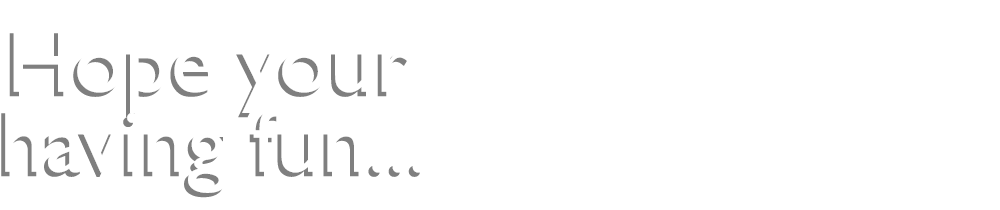
<style>
.page{position:relative;width:1000px;height:210px;background:#ffffff}
.page>*{position:absolute;margin:0}
.t1{font:92px/80px "GillSansMT"}
</style>
<div class="page">
<p class="t1" style="left:1px;top:33px;width:419px;height:165px;text-align:center">Hope your<br>having fun...</p>
</div>
